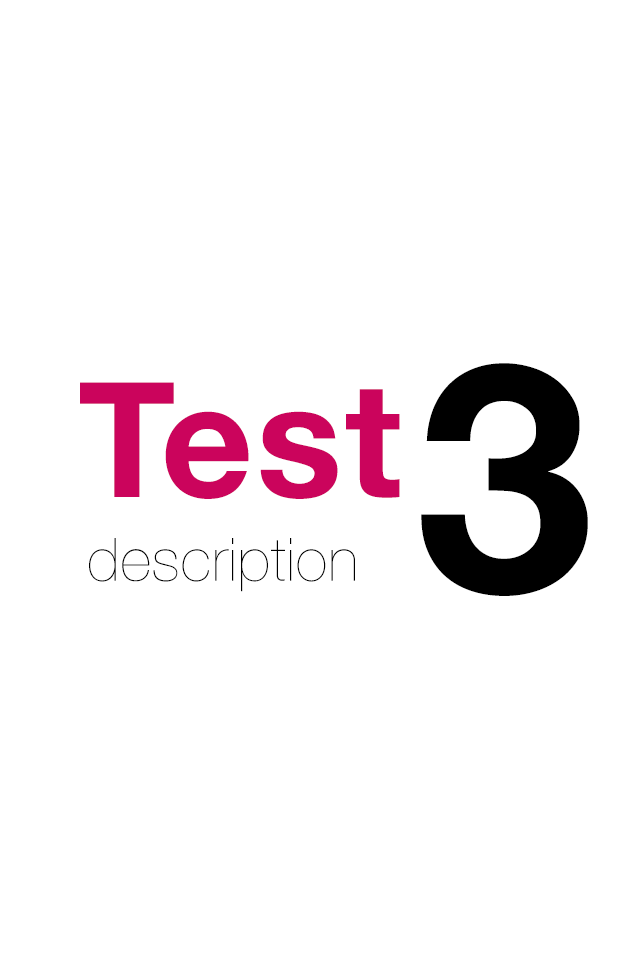
<style>
.page{position:relative;width:640px;height:960px;background:#ffffff}
.page>*{position:absolute;margin:0}
.t1{font:320px "HelveticaNeue-Bold";letter-spacing:0.02em;color:#000000}
.t2{font:160px "HelveticaNeue-Bold";letter-spacing:0.02em;color:#cb045c}
.t3{font:60px "HelveticaNeue-UltraLight";letter-spacing:0.02em;color:#000000}
</style>
<div class="page">
<p class="t1" style="left:421px;top:363px;width:167px;height:233px">3</p>
<p class="t2" style="left:80px;top:382px;width:320px;height:117px">Test</p>
<p class="t3" style="left:89px;top:538px;width:266px;height:54px">description</p>
</div>
